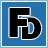
<style>
.page{position:relative;width:48px;height:48px;background:#2571aa}
.page>*{position:absolute;margin:0}
.t1{font:43px "FranklinGothic-Heavy";color:#000000}
.t2{font:32.5px "FranklinGothic-Heavy";color:#000000}
</style>
<div class="page">
<p class="t1" style="left:9px;top:8px;width:21px;height:29px">F</p>
<p class="t2" style="left:22px;top:17px;width:20px;height:22px">D</p>
</div>
